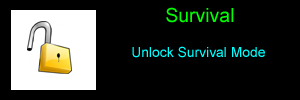
<style>
.page{position:relative;width:300px;height:100px;background:#000000}
.page>*{position:absolute;margin:0}
.t1{font:19.4px "ArialMT";color:#00ff00}
.t2{font:13.9px "ArialMT";color:#00ffff}
</style>
<div class="page">
<p class="t1" style="left:166px;top:7px;width:68px;height:16px">Survival</p>
<p class="t2" style="left:132px;top:46px;width:133px;height:12px">Unlock Survival Mode</p>
</div>
